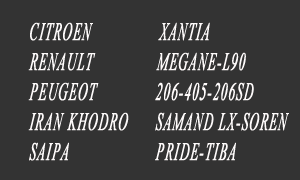
<style>
.page{position:relative;width:300px;height:180px;background:#333333}
.page>*{position:absolute;margin:0}
.t1{font:25px "TimesNewRomanPS-ItalicMT";letter-spacing:0.075em;color:#fefbfb;text-transform:uppercase;font-weight:bold;font-style:italic;scale:0.51 1}
</style>
<div class="page">
<p class="t1" style="left:28px;top:22px;width:261px;height:139px">CITROEN               XANTIA<br>RENAULT              MEGANE-L90<br>PEUGEOT             206-405-206SD<br>iRAN KHODRO      SAMAND LX-SOREN<br>SAIPA                   PRIDE-TIBA</p>
</div>
